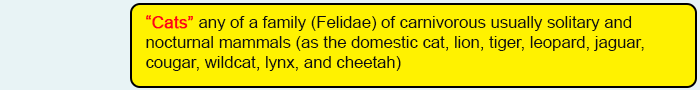
<style>
.page{position:relative;width:700px;height:90px;background:#fff200}
.page>*{position:absolute;margin:0}
.t1{font:16.7px "ArialMT";color:#0e0f0f}
.t2{font:16.7px "ArialMT";color:#ff0416;font-weight:bold}
</style>
<div class="page">
<p class="t1" style="left:146px;top:15px;width:498px;height:56px"><span class="t2">“Cats” </span>any of a family (Felidae) of carnivorous usually solitary and <br>nocturnal mammals (as the domestic cat, lion, tiger, leopard, jaguar, <br>cougar, wildcat, lynx, and cheetah)</p>
</div>
